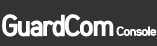
<style>
.page{position:relative;width:157px;height:46px;background:#333333}
.page>*{position:absolute;margin:0}
.t1{font:28px "HCRDotum-Bold";letter-spacing:-0.09em;color:#ffffff;font-weight:bold;scale:0.9 1}
.t2{font:12px "HCRDotum-Bold";letter-spacing:-0.09em;color:#ffffff;font-weight:bold}
</style>
<div class="page">
<p class="t1" style="left:2px;top:14px;width:155px;height:23px">GuardCom<span class="t2"> Console</span></p>
</div>
